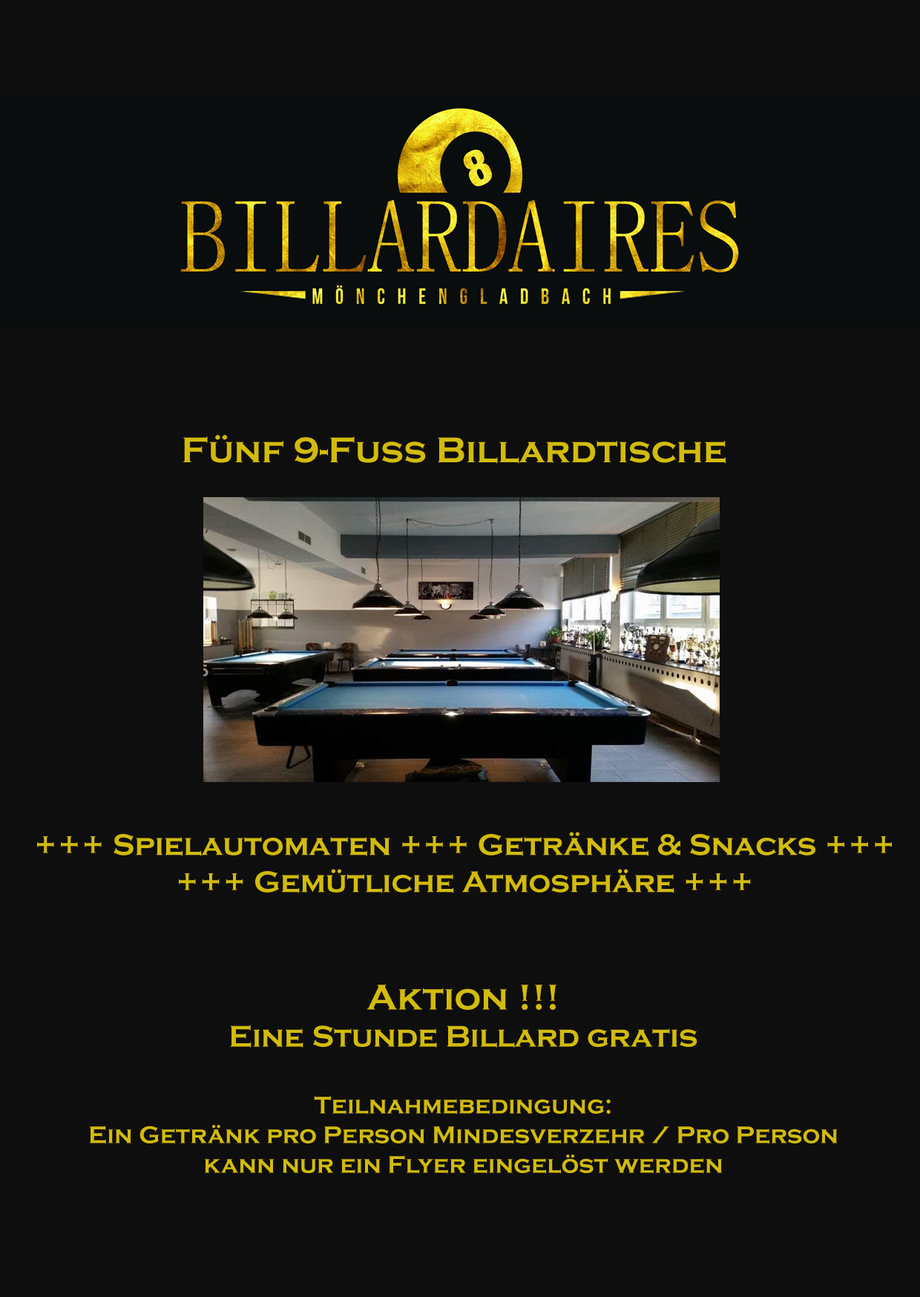
<style>
.page{position:relative;width:920px;height:1297px;background:#0f0e0e}
.page>*{position:absolute;margin:0}
.t1{font:37.1px "CopperplateGothic-Bold";color:#d2bb0b}
.t2{font:30.9px "CopperplateGothic-Bold";color:#d2bb0b}
.t3{font:24.7px "CopperplateGothic-Bold";color:#d2bb0b}
</style>
<div class="page">
<p class="t1" style="left:183px;top:435px;width:542px;height:29px">Fünf 9-Fuss Billardtische</p>
<p class="t2" style="left:37px;top:831px;width:855px;height:62px;text-align:center">+++ Spielautomaten +++ Getränke &amp; Snacks +++<br>+++ Gemütliche Atmosphäre +++</p>
<p class="t3" style="left:90px;top:984px;width:747px;height:189px;text-align:center"><span class="t1">Aktion !!!<br></span><span class="t2">Eine Stunde Billard gratis<br><br></span>Teilnahmebedingung: <br>Ein Getränk pro Person Mindesverzehr / Pro Person kann nur ein Flyer eingelöst werden</p>
</div>
